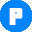
<style>
.page{position:relative;width:32px;height:32px;background:#0084ff}
.page>*{position:absolute;margin:0}
.t1{font:34.1px "Pricedown";color:#ffffff}
</style>
<div class="page">
<p class="t1" style="left:9px;top:8px;width:14px;height:17px">P</p>
</div>
